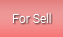
<style>
.page{position:relative;width:63px;height:37px}
.page>*{position:absolute;margin:0}
.t1{font:12px "Roboto-Light";color:#ffffff}
</style>
<div class="page">
<p class="t1" style="left:13px;top:13px;width:38px;height:10px">For Sell</p>
</div>
